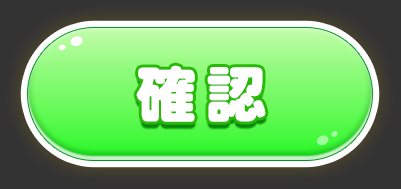
<style>
.page{position:relative;width:401px;height:189px}
.page>*{position:absolute;margin:0}
.t1{font:62.5px "DFYuan-W12-WIN-BF";letter-spacing:0.12em;color:#ffffff}
</style>
<div class="page">
<p class="t1" style="left:136px;top:65px;width:130px;height:57px">確認</p>
</div>
